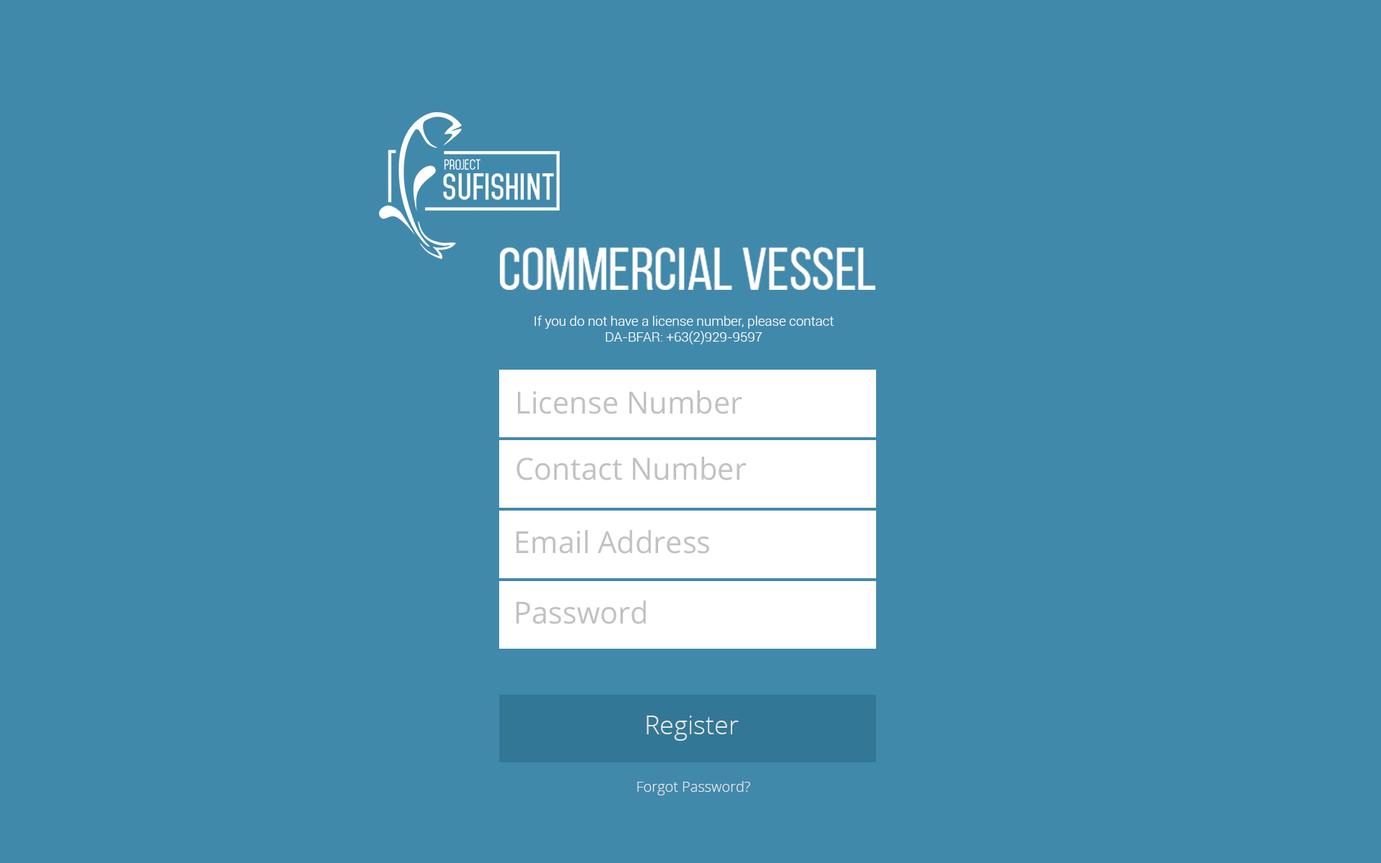
<style>
.page{position:relative;width:1381px;height:863px;background:#4189ab}
.page>*{position:absolute;margin:0}
.t1{font:60.2px "BebasNeueRegular";color:#ffffff}
.t2{font:13.6px/15.4px "Roboto-Light";color:#ffffff}
.t3{font:30.4px "OpenSans";color:#c1c1c1}
.t4{font:25.9px "OpenSans-Light";color:#ebebeb}
.t5{font:14.4px "OpenSans-Light";color:#ebebeb}
</style>
<div class="page">
<p class="t1" style="left:500px;top:247px;width:376px;height:43px">COMMERCIAL VESSEL</p>
<p class="t2" style="left:535px;top:316px;width:299px;height:29px;text-align:center">If you do not have a license number, please contact DA-BFAR: +63(2)929-9597<br>929-8074</p>
<p class="t3" style="left:518px;top:391px;width:224px;height:23px">License Number</p>
<p class="t3" style="left:517px;top:457px;width:230px;height:24px">Contact Number</p>
<p class="t3" style="left:517px;top:530px;width:192px;height:24px">Email Address</p>
<p class="t3" style="left:517px;top:601px;width:129px;height:23px">Password</p>
<p class="t4" style="left:647px;top:716px;width:92px;height:25px">Register</p>
<p class="t5" style="left:637px;top:781px;width:113px;height:15px">Forgot Password?</p>
</div>
